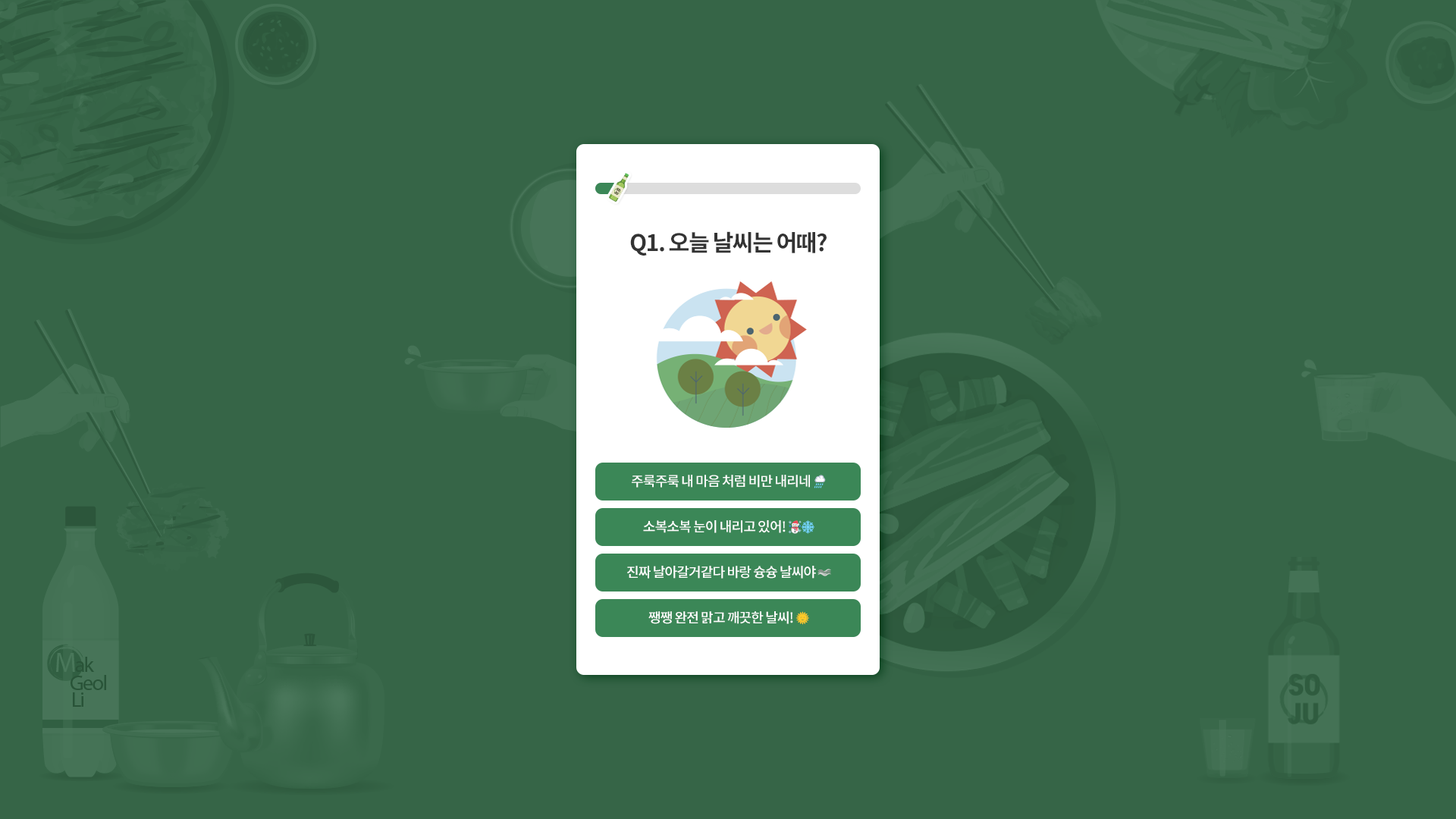
<style>
.page{position:relative;width:1456px;height:819px;background:#366547}
.page>*{position:absolute;margin:0}
.t1{font:22.7px "NotoSansCJKkr-Bold";letter-spacing:-0.05em;color:#333333}
.t2{font:13.6px "NotoSansCJKkr-Medium";letter-spacing:-0.05em;color:#ffffff}
.t3{font:13.6px "EmojiOneColor";letter-spacing:-0.05em;color:#ffffff}
</style>
<div class="page">
<p class="t1" style="left:630px;top:231px;width:197px;height:25px">Q1. 오늘 날씨는 어때?</p>
<p class="t2" style="left:632px;top:475px;width:194px;height:13px">주룩주룩 내 마음 처럼 비만 내리네 <span class="t3">🌧</span></p>
<p class="t2" style="left:643px;top:520px;width:171px;height:14px">소복소복 눈이 내리고 있어! <span class="t3">☃❄</span></p>
<p class="t2" style="left:627px;top:566px;width:204px;height:13px">진짜 날아갈거같다 바랑 슝슝 날씨야<span class="t3"> 🌫</span></p>
<p class="t2" style="left:648px;top:611px;width:161px;height:14px">쨍쨍 완전 맑고 깨끗한 날씨! <span class="t3">🌞</span></p>
</div>
